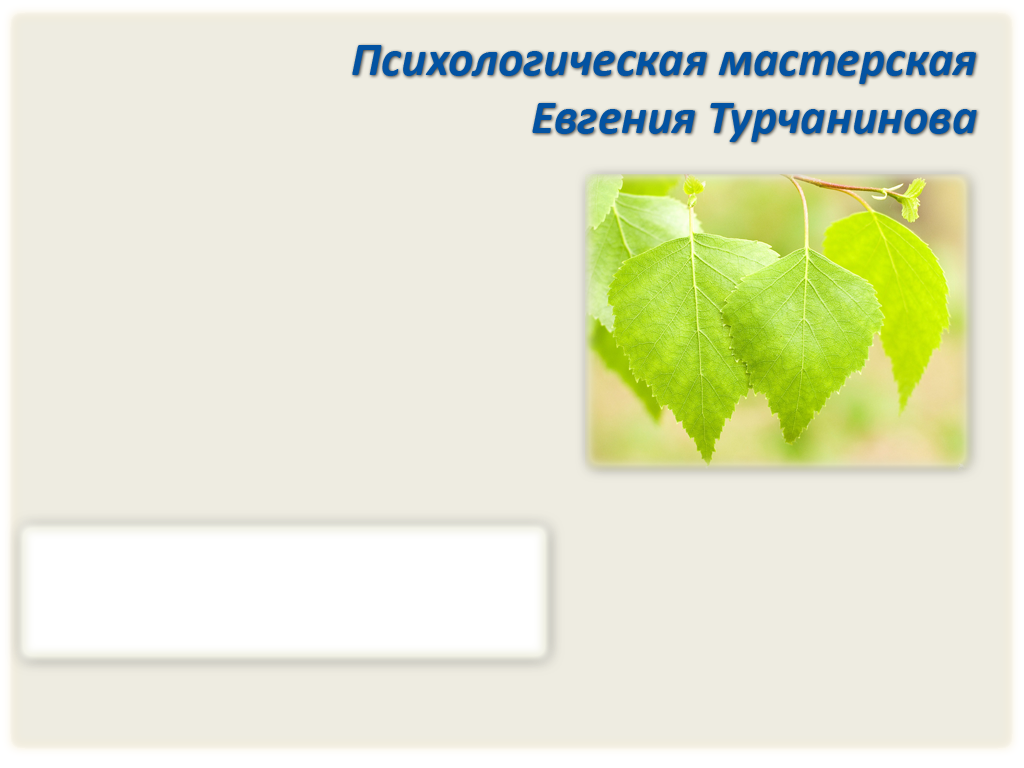
<style>
.page{position:relative;width:1024px;height:768px;background:#eeece1}
.page>*{position:absolute;margin:0}
.t1{font:48px "Calibri-BoldItalic";color:#0353a2}
</style>
<div class="page">
<p class="t1" style="left:352px;top:45px;width:625px;height:97px;text-align:right">Психологическая мастерская<br>Евгения Турчанинова</p>
</div>
